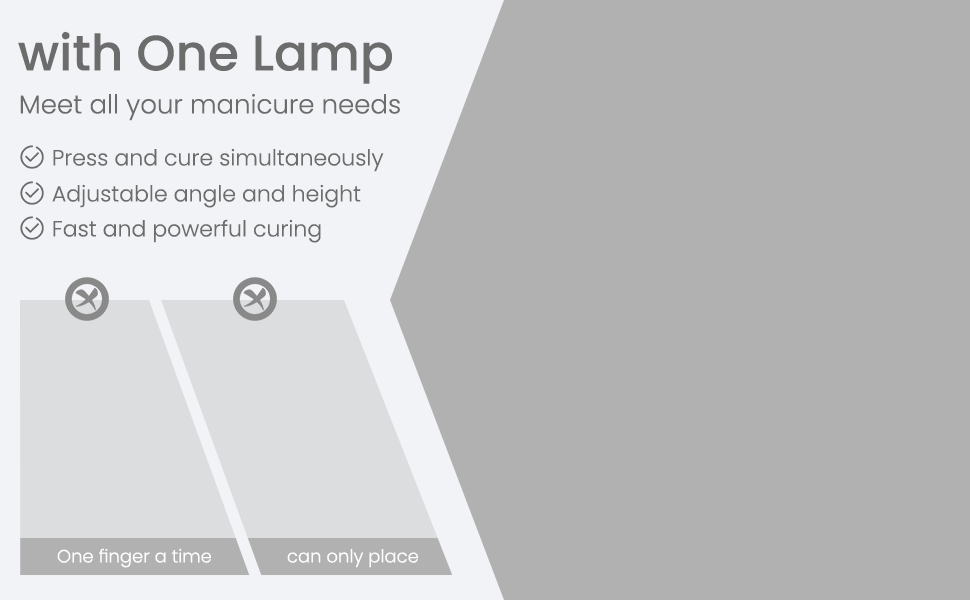
<style>
.page{position:relative;width:970px;height:600px;background:#b1b1b1}
.page>*{position:absolute;margin:0}
.t1{font:50px "Poppins-Medium";color:#6c6c6c}
.t2{font:26px "Poppins-Light";color:#6c6c6c}
.t3{font:22px "Poppins-Light";color:#6c6c6c}
.t4{font:18px "Poppins-Light";color:#ffffff}
</style>
<div class="page">
<p class="t1" style="left:18px;top:31px;width:374px;height:53px">with One Lamp</p>
<p class="t2" style="left:20px;top:93px;width:380px;height:28px">Meet all your manicure needs</p>
<p class="t3" style="left:53px;top:148px;width:331px;height:24px">Press and cure simultaneously</p>
<p class="t3" style="left:52px;top:184px;width:309px;height:24px">Adjustable angle and height</p>
<p class="t3" style="left:53px;top:219px;width:268px;height:24px">Fast and powerful curing</p>
<p class="t4" style="left:57px;top:548px;width:154px;height:20px">One finger a time</p>
<p class="t4" style="left:287px;top:549px;width:132px;height:19px">can only place</p>
</div>
